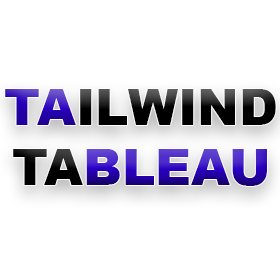
<style>
.page{position:relative;width:280px;height:280px;background:#ffffff}
.page>*{position:absolute;margin:0}
.t1{font:50px "Arial-Black"}
</style>
<div class="page">
<p class="t1" style="left:5px;top:89px;width:271px;height:97px;text-align:center">TAILWIND<br>TABLEAU</p>
</div>
